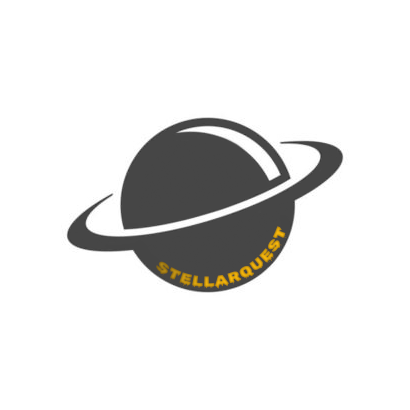
<style>
.page{position:relative;width:410px;height:410px;background:#ffffff}
.page>*{position:absolute;margin:0}
.t1{font:13.9px "RubikWetPaint-Regular";letter-spacing:0.022em}
</style>
<div class="page">
<p class="t1" style="left:156px;top:226px;width:131px;height:63px;rotate:-16deg">STELLARQUEST</p>
</div>
